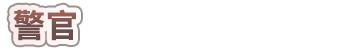
<style>
.page{position:relative;width:360px;height:50px;background:#ffffff}
.page>*{position:absolute;margin:0}
.t1{font:32px "SourceHanSansSC-Bold";font-weight:bold}
</style>
<div class="page">
<p class="t1" style="left:13px;top:9px;width:63px;height:32px">警官</p>
</div>
